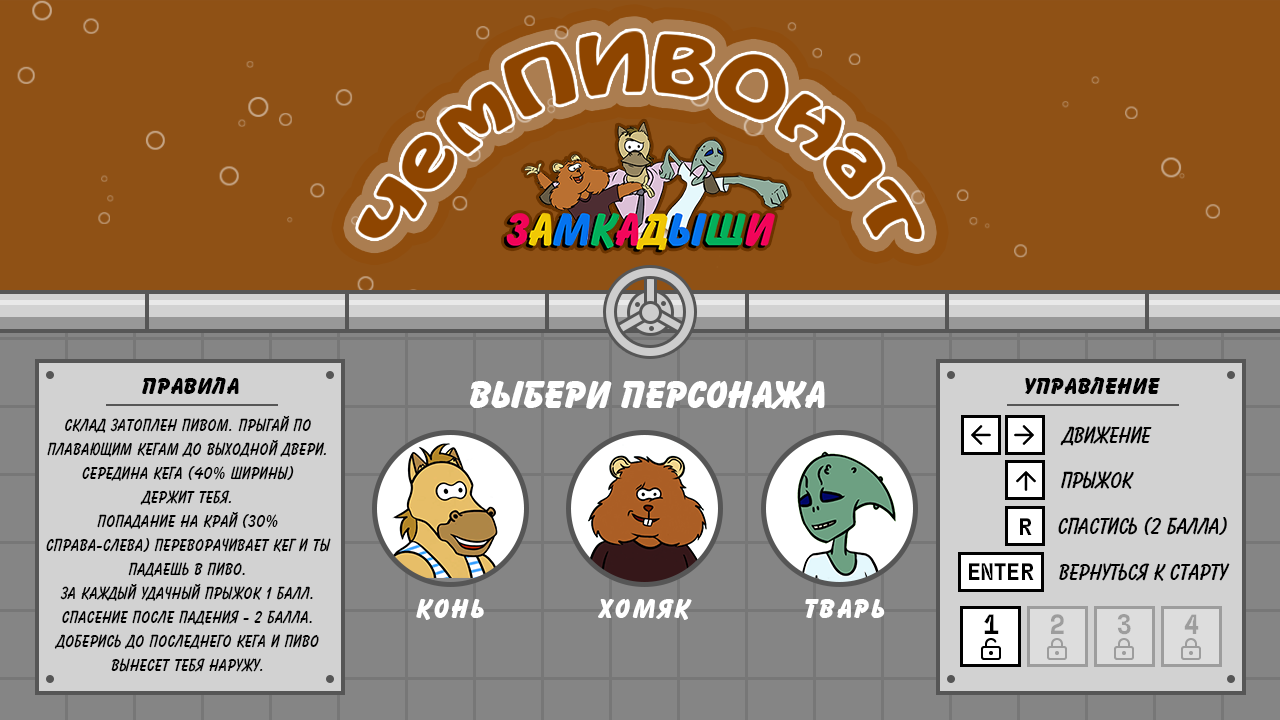
<style>
.page{position:relative;width:1280px;height:720px;background:#8f5115}
.page>*{position:absolute;margin:0}
.t1{font:24px "BalloonXBdTL-ExtraBold";letter-spacing:0.025em;color:#000000;text-transform:uppercase}
.t2{font:40px "BalloonXBdTL-ExtraBold";color:#ffffff;text-transform:uppercase}
.t3{font:18px/24px "BalloonBdBTrusbyme-Bold";letter-spacing:0.025em;color:#000000;text-transform:uppercase}
.t4{font:24px "BalloonBdBTrusbyme-Bold";color:#000000}
.t5{font:24px "FliegeMono-Bold";color:#000000}
.t6{font:24px "BalloonBdBTrusbyme-Bold";color:#000000;text-transform:uppercase}
.t7{font:24px "FliegeMono-Bold";letter-spacing:-0.05em;color:#000000}
.t8{font:28px "BalloonXBdTL-ExtraBold";letter-spacing:0.075em;color:#ffffff;text-transform:uppercase}
.t9{font:28px "FliegeMono-Bold";color:#000000;text-transform:uppercase}
.t10{font:28px "FliegeMono-Bold";color:#9d9d9d;text-transform:uppercase}
</style>
<div class="page">
<p class="t1" style="left:142px;top:377px;width:97px;height:17px">правила</p>
<p class="t1" style="left:1025px;top:377px;width:135px;height:17px">УПРАВЛЕНИЕ</p>
<p class="t2" style="left:470px;top:381px;width:355px;height:28px">выбери персонажа</p>
<p class="t3" style="left:46px;top:415px;width:285px;height:257px;text-align:center">СКЛАД ЗАТОПЛЕН ПИВОМ. ПРЫГАЙ ПО ПЛАВАЮЩИМ КЕГАМ ДО ВЫХОДНОЙ ДВЕРИ.<br>СЕРЕДИНА КЕГА (40% ШИРИНЫ) <br>ДЕРЖИТ ТЕБЯ.<br>ПОПАДАНИЕ НА КРАЙ (30% СПРАВА-СЛЕВА) ПЕРЕВОРАЧИВАЕТ КЕГ И ТЫ ПАДАЕШЬ В ПИВО.<br>ЗА КАЖДЫЙ УДАЧНЫЙ ПРЫЖОК 1 БАЛЛ.<br>СПАСЕНИЕ ПОСЛЕ ПАДЕНИЯ - 2 БАЛЛА.<br>ДОБЕРИСЬ ДО ПОСЛЕДНЕГО КЕГА И ПИВО ВЫНЕСЕТ ТЕБЯ НАРУЖУ.</p>
<p class="t4" style="left:1060px;top:426px;width:92px;height:20px">ДВИЖЕНИЕ</p>
<p class="t4" style="left:1061px;top:471px;width:73px;height:18px">ПРЫЖОК</p>
<p class="t5" style="left:1020px;top:518px;width:12px;height:17px">R</p>
<p class="t6" style="left:1058px;top:517px;width:169px;height:18px">спастись (2 балла)</p>
<p class="t7" style="left:969px;top:563px;width:65px;height:17px">ENTER</p>
<p class="t6" style="left:1059px;top:563px;width:171px;height:18px">вернуться к старту</p>
<p class="t8" style="left:416px;top:599px;width:68px;height:21px">конь</p>
<p class="t8" style="left:598px;top:599px;width:94px;height:21px">хомяк</p>
<p class="t8" style="left:805px;top:599px;width:80px;height:19px">тварь</p>
<p class="t9" style="left:984px;top:614px;width:15px;height:20px">1</p>
<p class="t10" style="left:1051px;top:614px;width:13px;height:20px">2</p>
<p class="t10" style="left:1117px;top:614px;width:14px;height:21px">3</p>
<p class="t10" style="left:1184px;top:614px;width:15px;height:20px">4</p>
</div>
